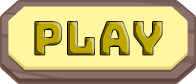
<style>
.page{position:relative;width:196px;height:84px;background:#fff69e}
.page>*{position:absolute;margin:0}
.t1{font:48px "Bungee-Regular"}
</style>
<div class="page">
<p class="t1" style="left:34px;top:21px;width:129px;height:35px">play</p>
</div>
